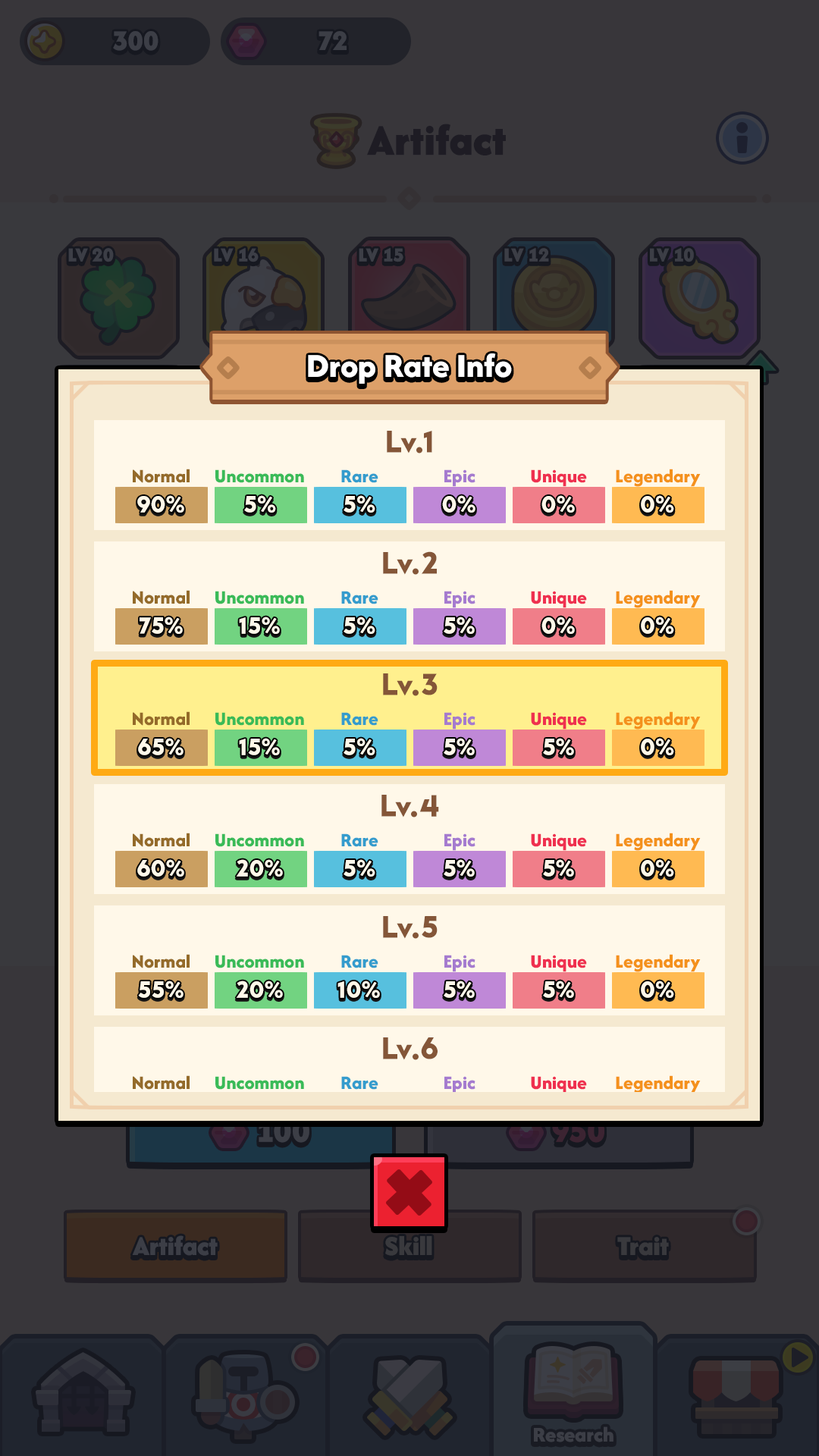
<style>
.page{position:relative;width:819px;height:1456px;background:#38363a}
.page>*{position:absolute;margin:0}
.t1{font:34.9px "AfacadFlux-ExtraBold";color:#ffffff}
.t2{font:31.8px "LTAvocado-Bold";color:#845638}
.t3{font:19.7px "AfacadFlux-ExtraBold";color:#946b2a}
.t4{font:19.7px "AfacadFlux-ExtraBold";color:#3abb58}
.t5{font:19.7px "AfacadFlux-ExtraBold";color:#349ccd}
.t6{font:19.7px "AfacadFlux-ExtraBold";color:#a57bcf}
.t7{font:19.7px "AfacadFlux-ExtraBold";color:#ef304f}
.t8{font:19.7px "AfacadFlux-ExtraBold";color:#f4911c}
.t9{font:24.3px "LTAvocado-Bold";color:#fff8e9}
</style>
<div class="page">
<p class="t1" style="left:308px;top:353px;width:204px;height:31px">Drop Rate Info</p>
<p class="t2" style="left:387px;top:431px;width:45px;height:22px">Lv.1</p>
<p class="t3" style="left:133px;top:469px;width:57px;height:14px">Normal</p>
<p class="t4" style="left:215px;top:469px;width:89px;height:14px">Uncommon</p>
<p class="t5" style="left:341px;top:469px;width:37px;height:14px">Rare</p>
<p class="t6" style="left:444px;top:469px;width:31px;height:18px">Epic</p>
<p class="t7" style="left:531px;top:469px;width:56px;height:18px">Unique</p>
<p class="t8" style="left:616px;top:469px;width:85px;height:18px">Legendary</p>
<p class="t9" style="left:137px;top:495px;width:47px;height:18px">90%</p>
<p class="t9" style="left:244px;top:495px;width:32px;height:18px">5%</p>
<p class="t9" style="left:344px;top:495px;width:31px;height:18px">5%</p>
<p class="t9" style="left:442px;top:495px;width:33px;height:18px">0%</p>
<p class="t9" style="left:541px;top:495px;width:34px;height:18px">0%</p>
<p class="t9" style="left:641px;top:495px;width:33px;height:18px">0%</p>
<p class="t2" style="left:383px;top:551px;width:54px;height:24px">Lv.2</p>
<p class="t3" style="left:133px;top:590px;width:57px;height:14px">Normal</p>
<p class="t4" style="left:215px;top:591px;width:89px;height:13px">Uncommon</p>
<p class="t5" style="left:341px;top:591px;width:37px;height:13px">Rare</p>
<p class="t6" style="left:444px;top:591px;width:31px;height:17px">Epic</p>
<p class="t7" style="left:531px;top:591px;width:56px;height:17px">Unique</p>
<p class="t8" style="left:616px;top:590px;width:85px;height:18px">Legendary</p>
<p class="t9" style="left:140px;top:617px;width:43px;height:17px">75%</p>
<p class="t9" style="left:239px;top:617px;width:41px;height:17px">15%</p>
<p class="t9" style="left:344px;top:617px;width:31px;height:17px">5%</p>
<p class="t9" style="left:444px;top:617px;width:31px;height:17px">5%</p>
<p class="t9" style="left:541px;top:617px;width:34px;height:17px">0%</p>
<p class="t9" style="left:641px;top:617px;width:33px;height:17px">0%</p>
<p class="t2" style="left:383px;top:673px;width:55px;height:23px">Lv.3</p>
<p class="t3" style="left:133px;top:711px;width:57px;height:15px">Normal</p>
<p class="t4" style="left:215px;top:712px;width:89px;height:14px">Uncommon</p>
<p class="t5" style="left:341px;top:712px;width:37px;height:14px">Rare</p>
<p class="t6" style="left:444px;top:712px;width:31px;height:18px">Epic</p>
<p class="t7" style="left:531px;top:712px;width:56px;height:18px">Unique</p>
<p class="t8" style="left:616px;top:711px;width:85px;height:19px">Legendary</p>
<p class="t9" style="left:138px;top:738px;width:46px;height:17px">65%</p>
<p class="t9" style="left:239px;top:738px;width:41px;height:17px">15%</p>
<p class="t9" style="left:344px;top:738px;width:31px;height:17px">5%</p>
<p class="t9" style="left:444px;top:738px;width:31px;height:17px">5%</p>
<p class="t9" style="left:543px;top:738px;width:31px;height:17px">5%</p>
<p class="t9" style="left:641px;top:738px;width:33px;height:17px">0%</p>
<p class="t2" style="left:381px;top:795px;width:58px;height:22px">Lv.4</p>
<p class="t3" style="left:133px;top:833px;width:57px;height:14px">Normal</p>
<p class="t4" style="left:215px;top:833px;width:89px;height:14px">Uncommon</p>
<p class="t5" style="left:341px;top:833px;width:37px;height:14px">Rare</p>
<p class="t6" style="left:444px;top:833px;width:31px;height:18px">Epic</p>
<p class="t7" style="left:531px;top:833px;width:56px;height:18px">Unique</p>
<p class="t8" style="left:616px;top:833px;width:85px;height:18px">Legendary</p>
<p class="t9" style="left:137px;top:859px;width:47px;height:18px">60%</p>
<p class="t9" style="left:236px;top:859px;width:47px;height:18px">20%</p>
<p class="t9" style="left:344px;top:859px;width:31px;height:18px">5%</p>
<p class="t9" style="left:444px;top:859px;width:31px;height:18px">5%</p>
<p class="t9" style="left:543px;top:859px;width:31px;height:18px">5%</p>
<p class="t9" style="left:641px;top:859px;width:33px;height:18px">0%</p>
<p class="t2" style="left:383px;top:916px;width:55px;height:23px">Lv.5</p>
<p class="t3" style="left:133px;top:954px;width:57px;height:14px">Normal</p>
<p class="t8" style="left:616px;top:954px;width:85px;height:18px">Legendary</p>
<p class="t4" style="left:215px;top:955px;width:89px;height:13px">Uncommon</p>
<p class="t5" style="left:341px;top:955px;width:37px;height:13px">Rare</p>
<p class="t6" style="left:444px;top:955px;width:31px;height:17px">Epic</p>
<p class="t7" style="left:531px;top:955px;width:56px;height:17px">Unique</p>
<p class="t9" style="left:138px;top:981px;width:46px;height:17px">55%</p>
<p class="t9" style="left:236px;top:981px;width:47px;height:17px">20%</p>
<p class="t9" style="left:337px;top:981px;width:43px;height:17px">10%</p>
<p class="t9" style="left:444px;top:981px;width:31px;height:17px">5%</p>
<p class="t9" style="left:543px;top:981px;width:31px;height:17px">5%</p>
<p class="t9" style="left:641px;top:981px;width:33px;height:17px">0%</p>
<p class="t2" style="left:383px;top:1037px;width:55px;height:23px">Lv.6</p>
<p class="t3" style="left:133px;top:1075px;width:57px;height:15px">Normal</p>
<p class="t4" style="left:215px;top:1076px;width:89px;height:14px">Uncommon</p>
<p class="t5" style="left:341px;top:1076px;width:37px;height:14px">Rare</p>
<p class="t6" style="left:444px;top:1076px;width:31px;height:18px">Epic</p>
<p class="t7" style="left:531px;top:1076px;width:56px;height:18px">Unique</p>
<p class="t8" style="left:616px;top:1075px;width:85px;height:19px">Legendary</p>
</div>
